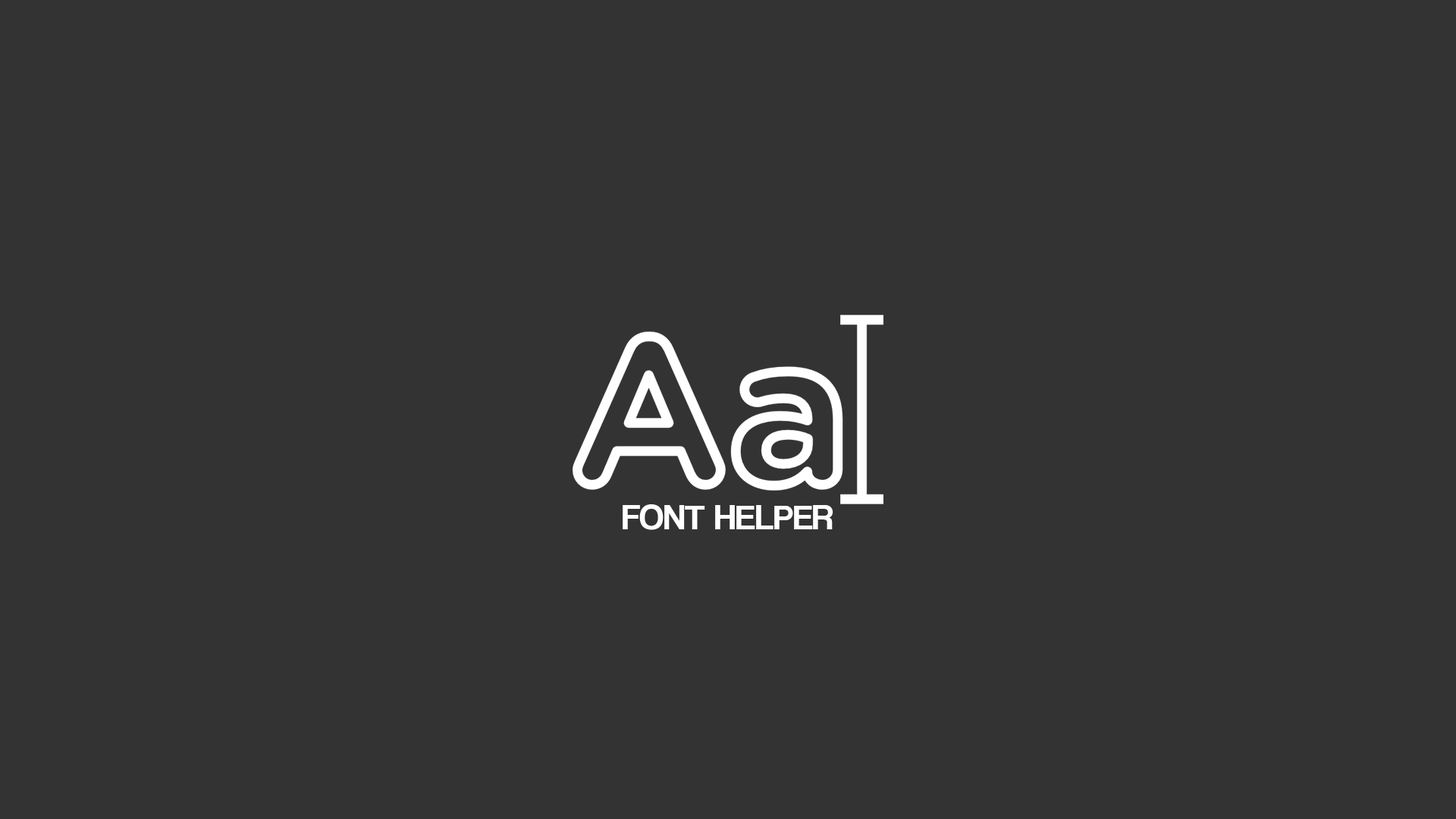
<style>
.page{position:relative;width:1456px;height:819px;background:#333333}
.page>*{position:absolute;margin:0}
.t1{font:36.4px "CoolveticaRg-Regular";letter-spacing:0.002em;color:#ffffff}
</style>
<div class="page">
<p class="t1" style="left:623px;top:504px;width:210px;height:26px">FONT HELPER</p>
</div>
